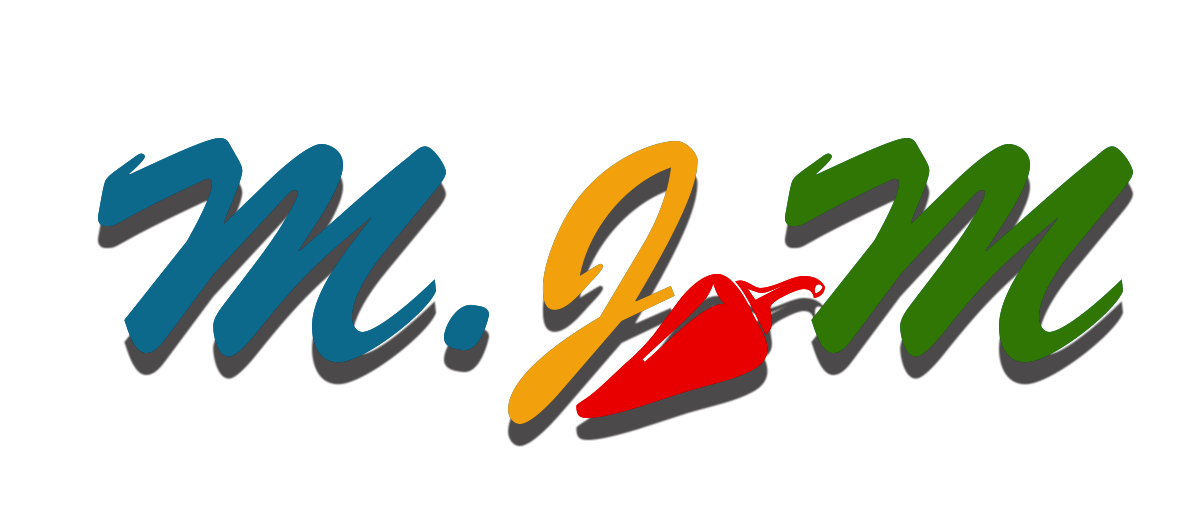
<style>
.page{position:relative;width:1200px;height:525px;background:#ffffff}
.page>*{position:absolute;margin:0}
.t1{font:300px "BrushScriptStd";text-transform:uppercase}
</style>
<div class="page">
<p class="t1" style="left:97px;top:138px;width:1036px;height:286px">M.J.M</p>
</div>
